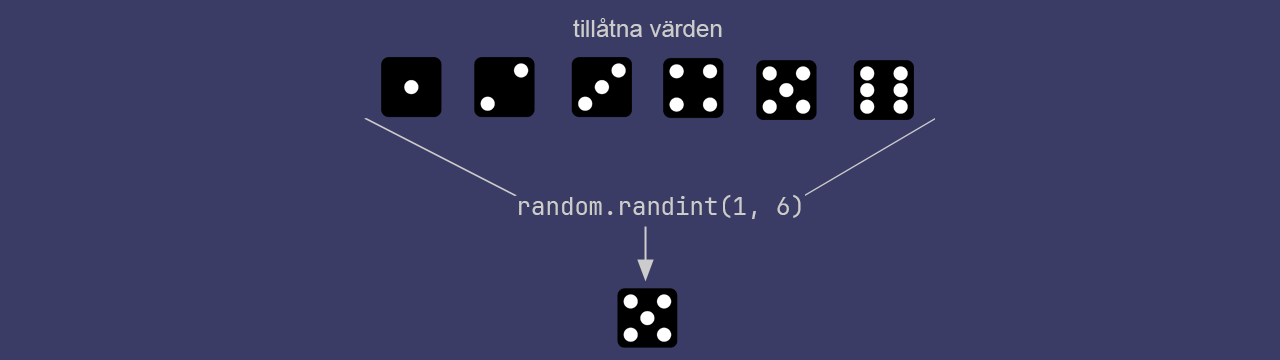
<style>
.page{position:relative;width:1280px;height:360px;background:#3a3c65}
.page>*{position:absolute;margin:0}
.t1{font:24px "ArialMT";color:#cccccc}
.t2{font:24px "JetBrainsMono-Regular";color:#cccccc}
</style>
<div class="page">
<p class="t1" style="left:573px;top:18px;width:149px;height:19px">tillåtna värden</p>
<p class="t2" style="left:519px;top:194px;width:282px;height:25px">random.randint(1, 6)</p>
</div>
